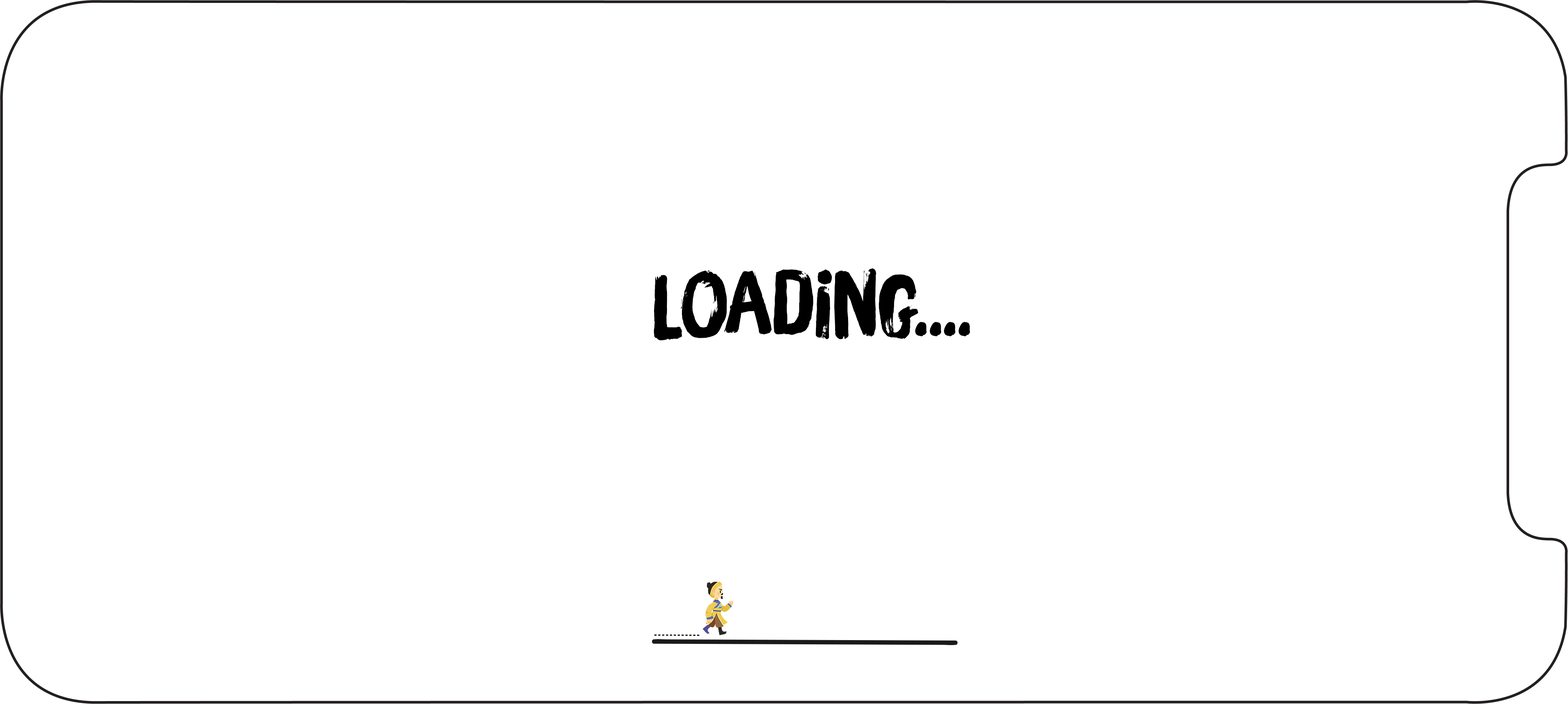
<style>
.page{position:relative;width:1568px;height:704px;background:#ffffff}
.page>*{position:absolute;margin:0}
.t1{font:88.7px "iCielBrushUp";color:#000000}
</style>
<div class="page">
<p class="t1" style="left:654px;top:268px;width:316px;height:72px">Loading....</p>
</div>
